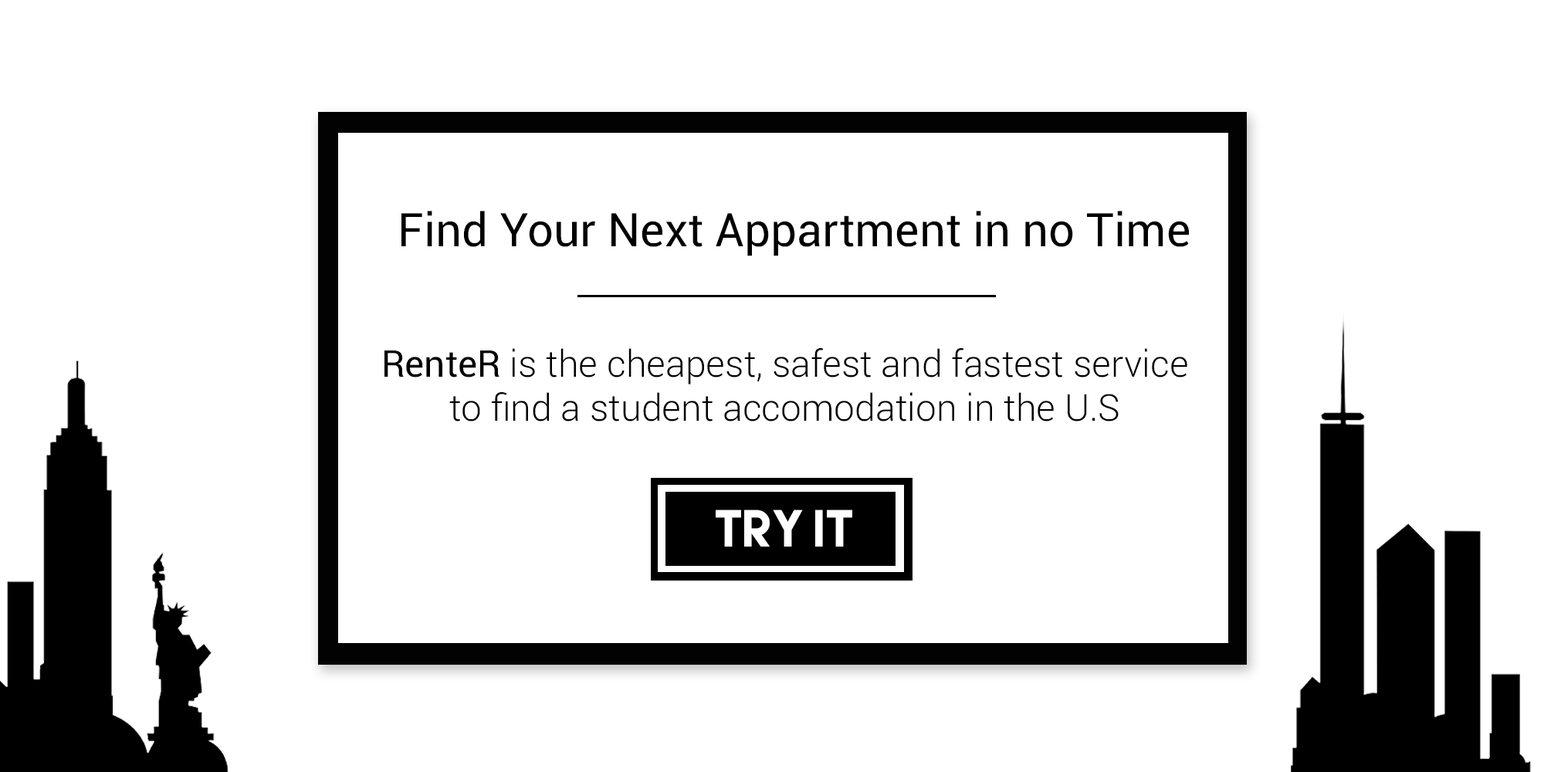
<style>
.page{position:relative;width:1544px;height:772px;background:#ffffff}
.page>*{position:absolute;margin:0}
.t1{font:46.3px "Roboto-Regular";color:#000000}
.t2{font:37.1px "Roboto-Light";color:#000000}
.t3{font:37.1px "Roboto-Regular";color:#000000}
.t4{font:46.3px "LemonMilk";color:#ffffff}
</style>
<div class="page">
<p class="t1" style="left:402px;top:211px;width:787px;height:45px">Find Your Next Appartment in no Time</p>
<p class="t2" style="left:385px;top:348px;width:803px;height:74px;text-align:center"><span class="t3">RenteR</span> is the cheapest, safest and fastest service to find a student accomodation in the U.S</p>
<p class="t4" style="left:716px;top:510px;width:136px;height:37px">TRY IT</p>
</div>
